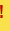
<style>
.page{position:relative;width:10px;height:31px;background:#f8e14c}
.page>*{position:absolute;margin:0}
.t1{font:17.5px "Arial-BoldMT";color:#c30000}
</style>
<div class="page">
<p class="t1" style="left:0px;top:5px;width:3px;height:13px">!</p>
</div>
